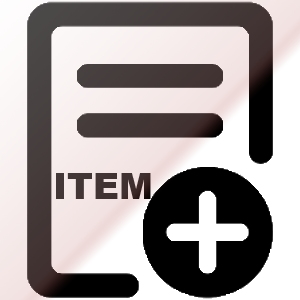
<style>
.page{position:relative;width:300px;height:300px}
.page>*{position:absolute;margin:0}
.t1{font:36px "Arial-Black";color:#413332}
</style>
<div class="page">
<p class="t1" style="left:56px;top:173px;width:95px;height:26px">ITEM</p>
</div>
